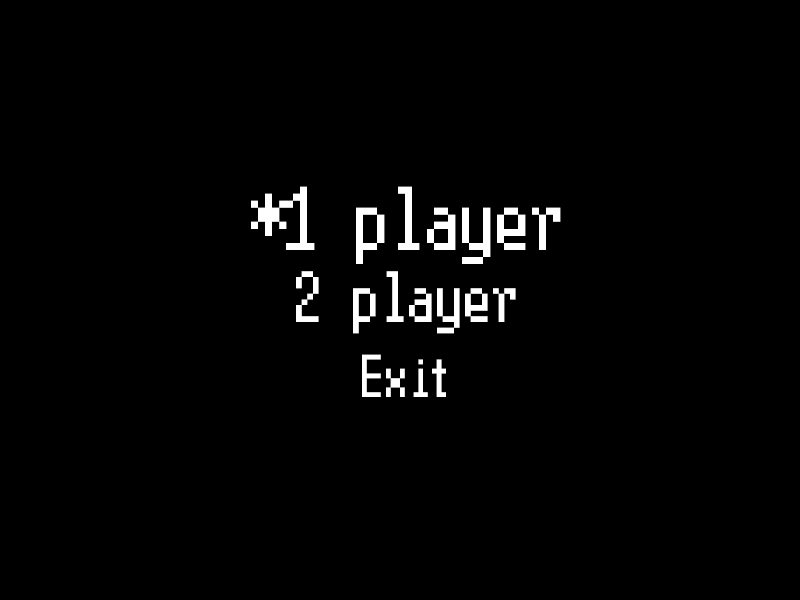
<style>
.page{position:relative;width:800px;height:600px;background:#000000}
.page>*{position:absolute;margin:0}
.t1{font:90px "Terminal";color:#ffffff}
.t2{font:72px "Terminal";color:#ffffff}
.t3{font:60px "Terminal";color:#ffffff}
</style>
<div class="page">
<p class="t1" style="left:251px;top:186px;width:310px;height:78px">*1 player</p>
<p class="t2" style="left:296px;top:271px;width:220px;height:63px">2 player</p>
<p class="t3" style="left:362px;top:354px;width:84px;height:43px">Exit</p>
</div>
